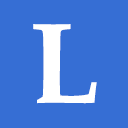
<style>
.page{position:relative;width:128px;height:128px;background:#366ed4}
.page>*{position:absolute;margin:0}
.t1{font:115px "BookAntiqua-Bold";letter-spacing:0.025em;color:#ffffff}
</style>
<div class="page">
<p class="t1" style="left:33px;top:24px;width:64px;height:80px">L</p>
</div>
